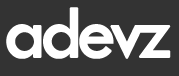
<style>
.page{position:relative;width:179px;height:76px;background:#333333}
.page>*{position:absolute;margin:0}
.t1{font:77px "TwCenMT-Regular";letter-spacing:-0.1em;color:#ffffff;font-weight:bold}
</style>
<div class="page">
<p class="t1" style="left:6px;top:7px;width:165px;height:52px">adevz</p>
</div>
